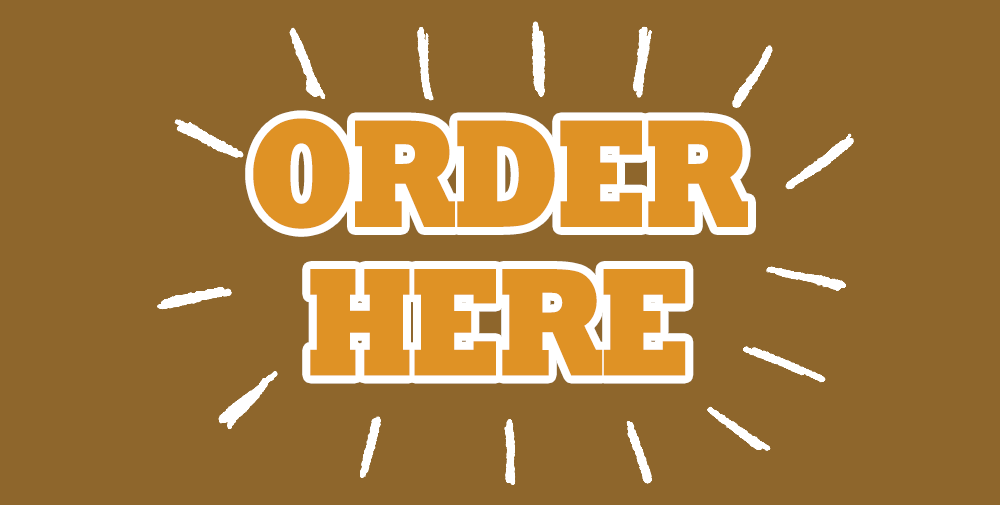
<style>
.page{position:relative;width:1000px;height:505px;background:#8e662c}
.page>*{position:absolute;margin:0}
.t1{font:156.2px/148.5px "Rockwell-ExtraBold";letter-spacing:-0.05em;color:#df9225;text-transform:uppercase;scale:0.81 1}
</style>
<div class="page">
<p class="t1" style="left:253px;top:118px;width:495px;height:258px;text-align:center">Order<br>here</p>
</div>
